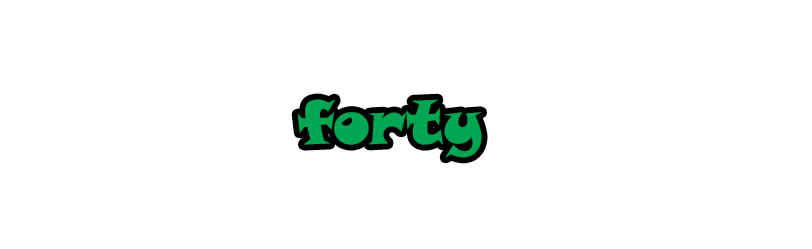
<style>
.page{position:relative;width:812px;height:249px;background:#ffffff}
.page>*{position:absolute;margin:0}
.t1{font:60px "SnapITC-Regular";color:#00a651}
</style>
<div class="page">
<p class="t1" style="left:297px;top:99px;width:185px;height:59px">forty</p>
</div>
